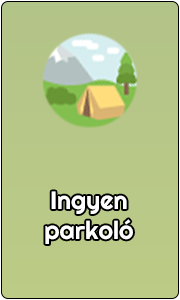
<style>
.page{position:relative;width:180px;height:300px}
.page>*{position:absolute;margin:0}
.t1{font:25px "Righteous-Regular";color:#ffffff}
</style>
<div class="page">
<p class="t1" style="left:45px;top:191px;width:88px;height:53px;text-align:center">Ingyen<br>parkoló</p>
</div>
